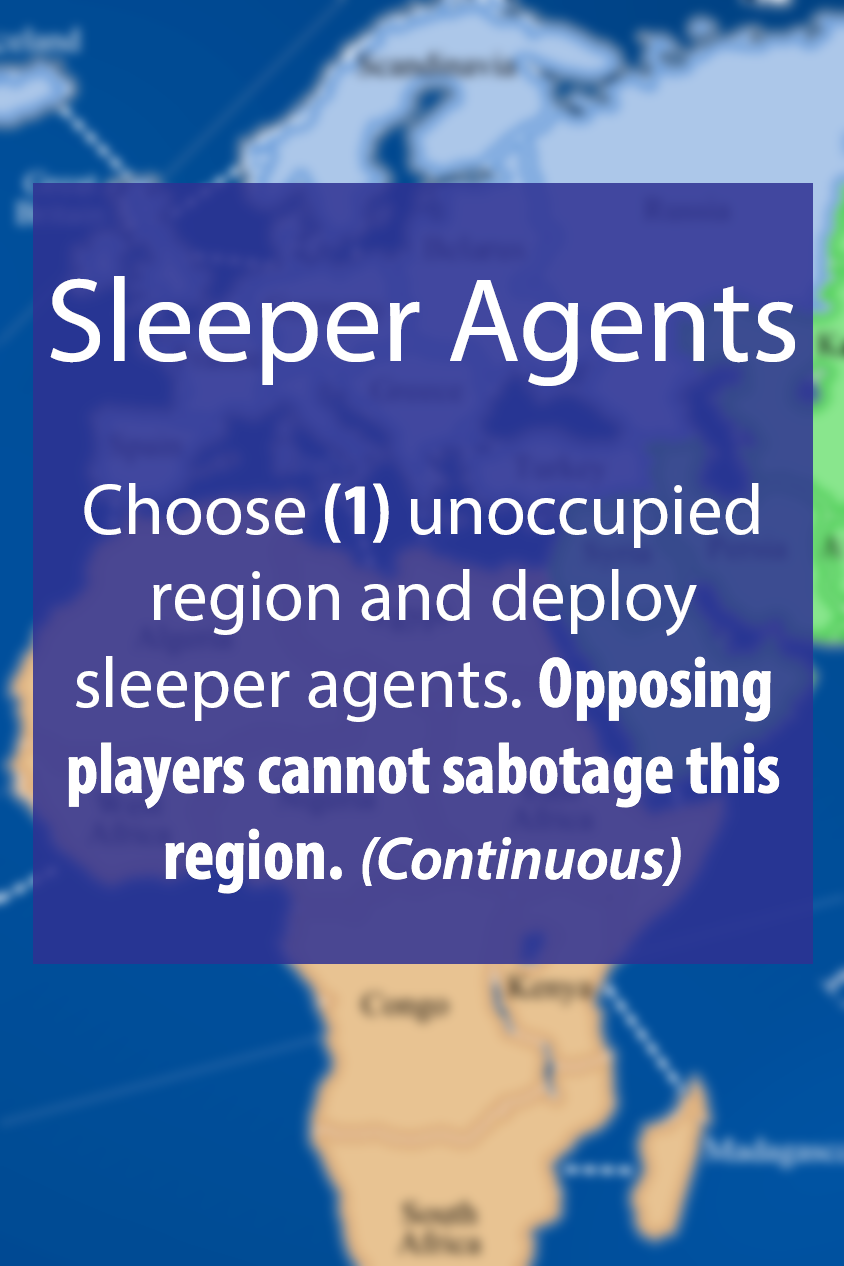
<style>
.page{position:relative;width:844px;height:1266px}
.page>*{position:absolute;margin:0}
.t1{font:72px "MyriadPro-BoldCond";color:#ffffff}
.t2{font:48px "MyriadPro-Regular";color:#ffffff}
.t3{font:120px "MyriadPro-Regular";color:#ffffff}
.t4{font:72px "MyriadPro-Regular";color:#ffffff}
.t5{font:60px "MyriadPro-SemiboldIt";color:#ffffff}
</style>
<div class="page">
<p class="t1" style="left:50px;top:276px;width:745px;height:618px;text-align:center"><span class="t2"><br></span><span class="t3">Sleeper Agents<br><br><br><br></span><span class="t4">Choose </span>(1)<span class="t4"> unoccupied region and deploy sleeper agents. </span>Opposing players cannot sabotage this region. <span class="t5">(Continuous)</span></p>
</div>
